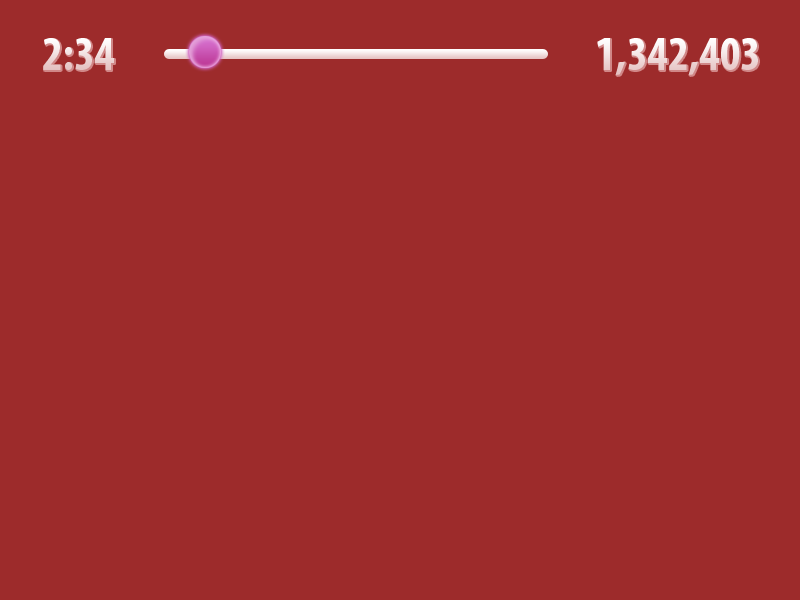
<style>
.page{position:relative;width:800px;height:600px;background:#9d2b2b}
.page>*{position:absolute;margin:0}
.t1{font:48px "MyriadPro-BoldCond"}
</style>
<div class="page">
<p class="t1" style="left:43px;top:38px;width:71px;height:32px">2:34</p>
<p class="t1" style="left:597px;top:38px;width:161px;height:37px">1,342,403</p>
</div>
